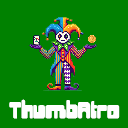
<style>
.page{position:relative;width:128px;height:128px;background:#008100}
.page>*{position:absolute;margin:0}
.t1{font:16px "Digifit";color:#ffffff;font-weight:bold}
</style>
<div class="page">
<p class="t1" style="left:9px;top:99px;width:111px;height:20px">ThumbAtro</p>
</div>
